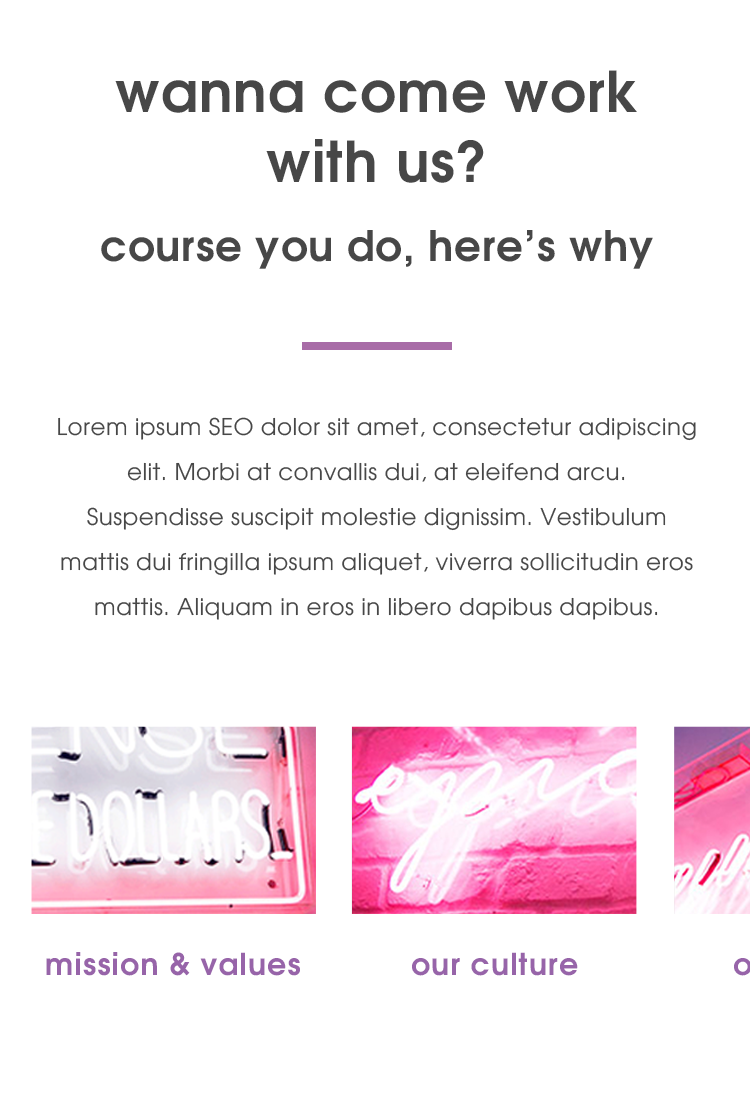
<style>
.page{position:relative;width:750px;height:1107px;background:#ffffff}
.page>*{position:absolute;margin:0}
.t1{font:56px/86px "MIssguided";letter-spacing:0.02em;color:#474747}
.t2{font:56px/70px "MIssguided";letter-spacing:0.02em;color:#474747}
.t3{font:42px "MIssguided";letter-spacing:0.02em;color:#474747}
.t4{font:23px/45px "MIssguided_Light";letter-spacing:0.02em;color:#474747}
.t5{font:23px/86px "MIssguided_Light";letter-spacing:0.02em;color:#474747}
.t6{font:23px/26px "MIssguided_Light";letter-spacing:0.02em;color:#474747}
.t7{font:30px "MIssguided";letter-spacing:0.04em;color:#9764a9}
</style>
<div class="page">
<p class="t1" style="left:115px;top:70px;width:522px;height:113px;text-align:center">wanna come work <span class="t2">with us?</span></p>
<p class="t3" style="left:101px;top:230px;width:552px;height:39px">course you do, here’s why</p>
<p class="t4" style="left:58px;top:417px;width:638px;height:203px;text-align:center"><span class="t5">Lorem ipsum SEO dolor sit amet, consectetur adipiscing </span>elit. Morbi at convallis dui, at eleifend arcu.<br>Suspendisse suscipit molestie dignissim. Vestibulum mattis dui fringilla ipsum aliquet, viverra sollicitudin eros mattis. Aliquam in eros in libero dapibus dapibus<span class="t6">.</span></p>
<p class="t7" style="left:46px;top:952px;width:254px;height:24px">mission &amp; values</p>
<p class="t7" style="left:412px;top:952px;width:166px;height:24px">our culture</p>
</div>
